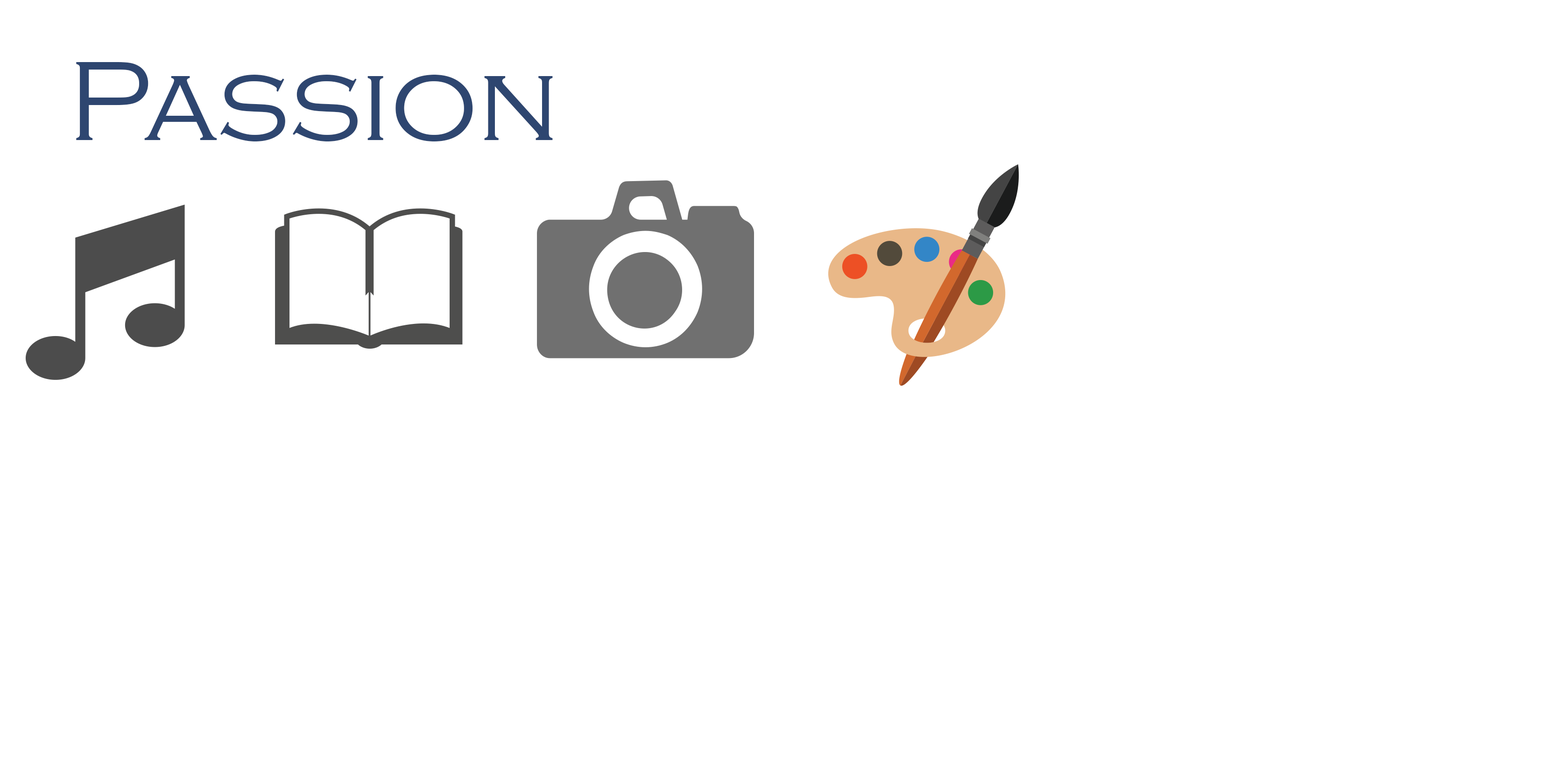
<style>
.page{position:relative;width:1544px;height:772px;background:#ffffff}
.page>*{position:absolute;margin:0}
.t1{font:116.7px "CopperplateGothic-Light";color:#2e4670}
</style>
<div class="page">
<p class="t1" style="left:76px;top:62px;width:477px;height:79px">Passion</p>
</div>
